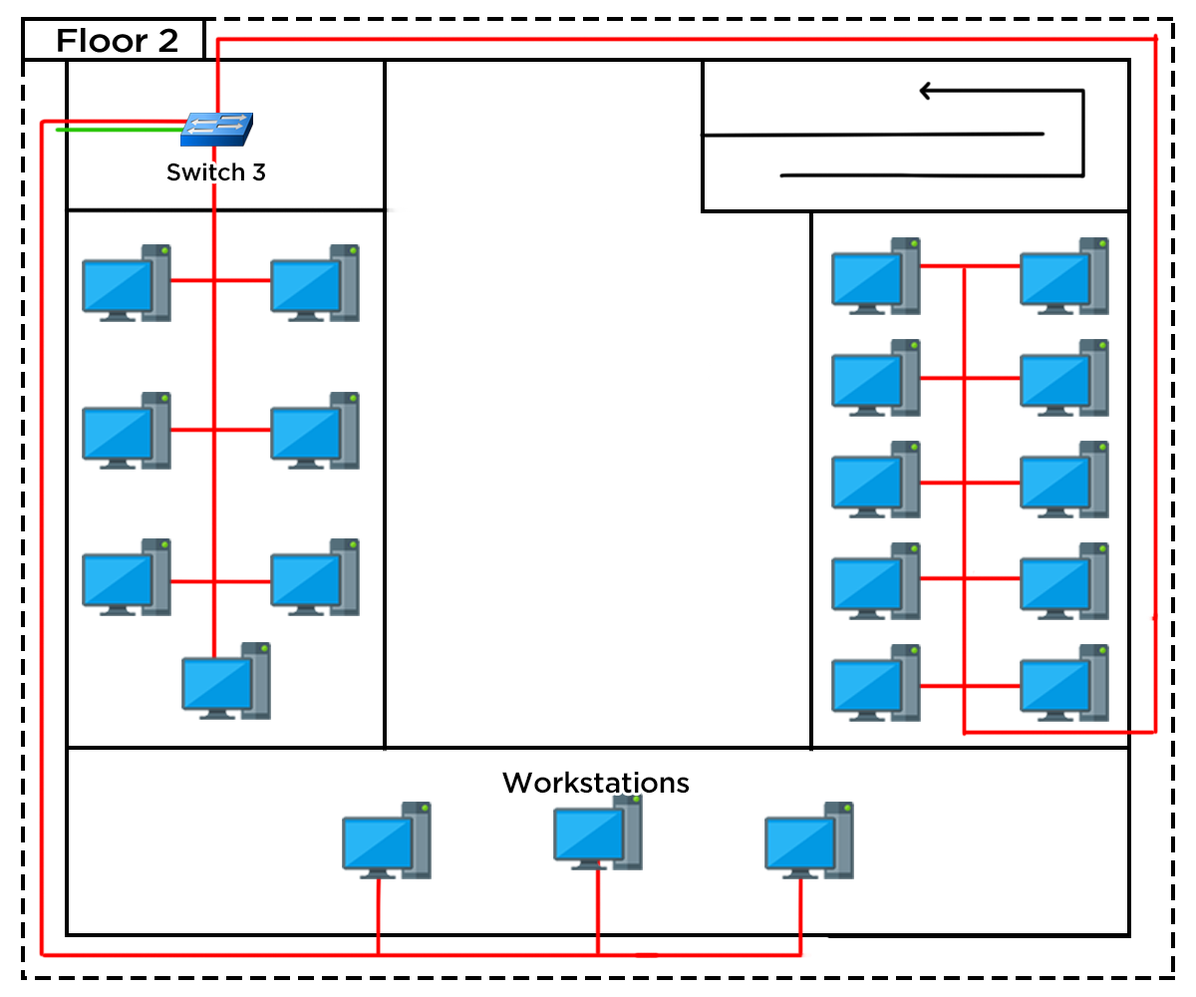
<style>
.page{position:relative;width:1196px;height:997px;background:#ffffff}
.page>*{position:absolute;margin:0}
.t1{font:32.8px "iCielGotham-Medium";letter-spacing:-0.02em;color:#000000;scale:1.1 1}
.t2{font:24.2px "iCielGotham-Medium";letter-spacing:-0.02em;color:#000000}
.t3{font:28.9px "iCielGotham-Medium";letter-spacing:-0.02em;color:#000000}
</style>
<div class="page">
<p class="t1" style="left:58px;top:28px;width:119px;height:25px">Floor 2</p>
<p class="t2" style="left:166px;top:162px;width:99px;height:19px">Switch 3</p>
<p class="t3" style="left:502px;top:771px;width:188px;height:22px">Workstations</p>
</div>
